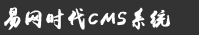
<style>
.page{position:relative;width:199px;height:35px;background:#333333}
.page>*{position:absolute;margin:0}
.t1{font:20.8px "yuweij";color:#ffffff;font-weight:bold}
</style>
<div class="page">
<p class="t1" style="left:4px;top:7px;width:167px;height:23px">易网时代CMS系统</p>
</div>
